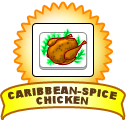
<style>
.page{position:relative;width:126px;height:120px;background:#ffffff}
.page>*{position:absolute;margin:0}
.t1{font:9.4px/9.4px "Arial-Black";letter-spacing:0.045em;color:#5b3714;text-transform:uppercase}
</style>
<div class="page">
<p class="t1" style="left:8px;top:86px;width:110px;height:19px;text-align:center">caribbean-spice<br>chicken</p>
</div>
